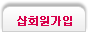
<style>
.page{position:relative;width:89px;height:32px}
.page>*{position:absolute;margin:0}
.t1{font:11px "Dotum";letter-spacing:-0.05em;color:#d9004b;font-weight:bold}
</style>
<div class="page">
<p class="t1" style="left:17px;top:16px;width:55px;height:10px">샵회원가입</p>
</div>
